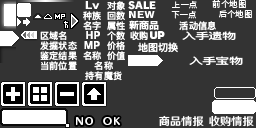
<style>
.page{position:relative;width:256px;height:128px;background:#333333}
.page>*{position:absolute;margin:0}
.t1{font:9.2px/10px "DFKingGothicSC14-Semibold";letter-spacing:0.005em;color:#ffffff}
.t2{font:8.3px "SourceHanSansSC-Regular";letter-spacing:0.005em;color:#ffffff}
.t3{font:9.2px "DFKingGothicSC14-Semibold";letter-spacing:0.005em;color:#ffffff}
.t4{font:9px "DFKingGothicSC14-Semibold";letter-spacing:-0.075em;color:#ffffff;scale:1.6 1}
.t5{font:10px "DFKingGothicSC14-Semibold";letter-spacing:0.005em;color:#ffffff}
.t6{font:9px "HummingStd-B";letter-spacing:0.18em;color:#ffffff}
.t7{font:11.2px "HYWenHei-HEW";letter-spacing:0.005em;color:#ffffff}
</style>
<div class="page">
<p class="t1" style="left:107px;top:1px;width:18px;height:60px;text-align:center">对象<br>回数<br>属性<br>个数<br>价格<br>价值</p>
<p class="t2" style="left:172px;top:0px;width:25px;height:9px">上一点</p>
<p class="t2" style="left:212px;top:0px;width:34px;height:9px">前个地图</p>
<p class="t1" style="left:83px;top:11px;width:18px;height:49px;text-align:center">种族<br>名字<br><br><br>名称</p>
<p class="t2" style="left:171px;top:10px;width:25px;height:9px">下一点</p>
<p class="t2" style="left:219px;top:10px;width:33px;height:9px">后个地图</p>
<p class="t3" style="left:179px;top:21px;width:37px;height:10px">活动信息</p>
<p class="t1" style="left:40px;top:31px;width:37px;height:40px">区域名<br>发掘状态<br>鉴定结果<br>当前位置</p>
<p class="t3" style="left:130px;top:31px;width:18px;height:9px">收购</p>
<p class="t4" style="left:182px;top:31px;width:54px;height:9px">入手遗物</p>
<p class="t5" style="left:138px;top:42px;width:40px;height:11px">地图切换</p>
<p class="t1" style="left:85px;top:61px;width:37px;height:20px;text-align:center">名称<br>持有魔货</p>
<p class="t4" style="left:189px;top:56px;width:54px;height:9px">入手宝物</p>
<p class="t6" style="left:76px;top:117px;width:17px;height:8px">NO</p>
<p class="t6" style="left:103px;top:117px;width:17px;height:8px">OK</p>
<p class="t7" style="left:159px;top:115px;width:45px;height:12px">商品情报</p>
<p class="t7" style="left:209px;top:115px;width:45px;height:12px">收购情报</p>
</div>
